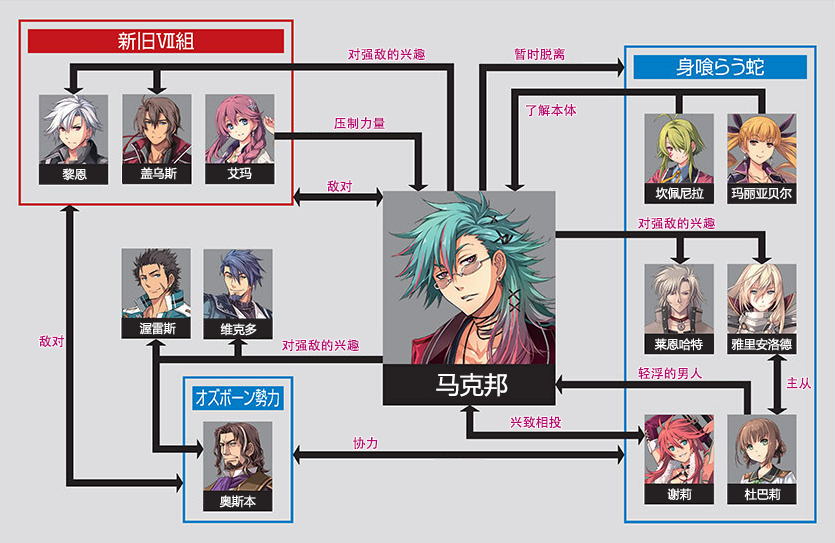
<style>
.page{position:relative;width:835px;height:543px;background:#dddddf}
.page>*{position:absolute;margin:0}
.t1{font:13px "AdobeHeitiStd-Regular";color:#b70773}
.t2{font:12px "MicrosoftYaHei";color:#ffffff}
.t3{font:24px "MicrosoftYaHei";color:#ffffff}
</style>
<div class="page">
<p class="t1" style="left:348px;top:48px;width:77px;height:13px">对强敌的兴趣</p>
<p class="t1" style="left:514px;top:48px;width:51px;height:13px">暂时脱离</p>
<p class="t1" style="left:526px;top:104px;width:51px;height:13px">了解本体</p>
<p class="t1" style="left:334px;top:117px;width:51px;height:13px">压制力量</p>
<p class="t2" style="left:62px;top:168px;width:25px;height:13px">黎恩</p>
<p class="t2" style="left:140px;top:167px;width:37px;height:13px">盖乌斯</p>
<p class="t2" style="left:227px;top:167px;width:25px;height:13px">艾玛</p>
<p class="t1" style="left:327px;top:180px;width:26px;height:13px">敌对</p>
<p class="t2" style="left:655px;top:187px;width:49px;height:13px">坎佩尼拉</p>
<p class="t2" style="left:731px;top:187px;width:61px;height:13px">玛丽亚贝尔</p>
<p class="t1" style="left:638px;top:217px;width:77px;height:13px">对强敌的兴趣</p>
<p class="t2" style="left:139px;top:322px;width:37px;height:13px">渥雷斯</p>
<p class="t2" style="left:220px;top:323px;width:37px;height:13px">维克多</p>
<p class="t1" style="left:39px;top:335px;width:26px;height:13px">敌对</p>
<p class="t1" style="left:282px;top:339px;width:77px;height:13px">对强敌的兴趣</p>
<p class="t2" style="left:654px;top:338px;width:49px;height:13px">莱恩哈特</p>
<p class="t2" style="left:731px;top:338px;width:61px;height:13px">雅里安洛德</p>
<p class="t3" style="left:436px;top:373px;width:72px;height:24px">马克邦</p>
<p class="t1" style="left:638px;top:367px;width:65px;height:13px">轻浮的男人</p>
<p class="t1" style="left:786px;top:377px;width:26px;height:13px">主从</p>
<p class="t1" style="left:510px;top:416px;width:52px;height:13px">兴致相投</p>
<p class="t1" style="left:353px;top:437px;width:25px;height:13px">协力</p>
<p class="t2" style="left:219px;top:495px;width:37px;height:13px">奥斯本</p>
<p class="t2" style="left:667px;top:488px;width:25px;height:13px">谢莉</p>
<p class="t2" style="left:744px;top:488px;width:37px;height:13px">杜巴莉</p>
</div>
